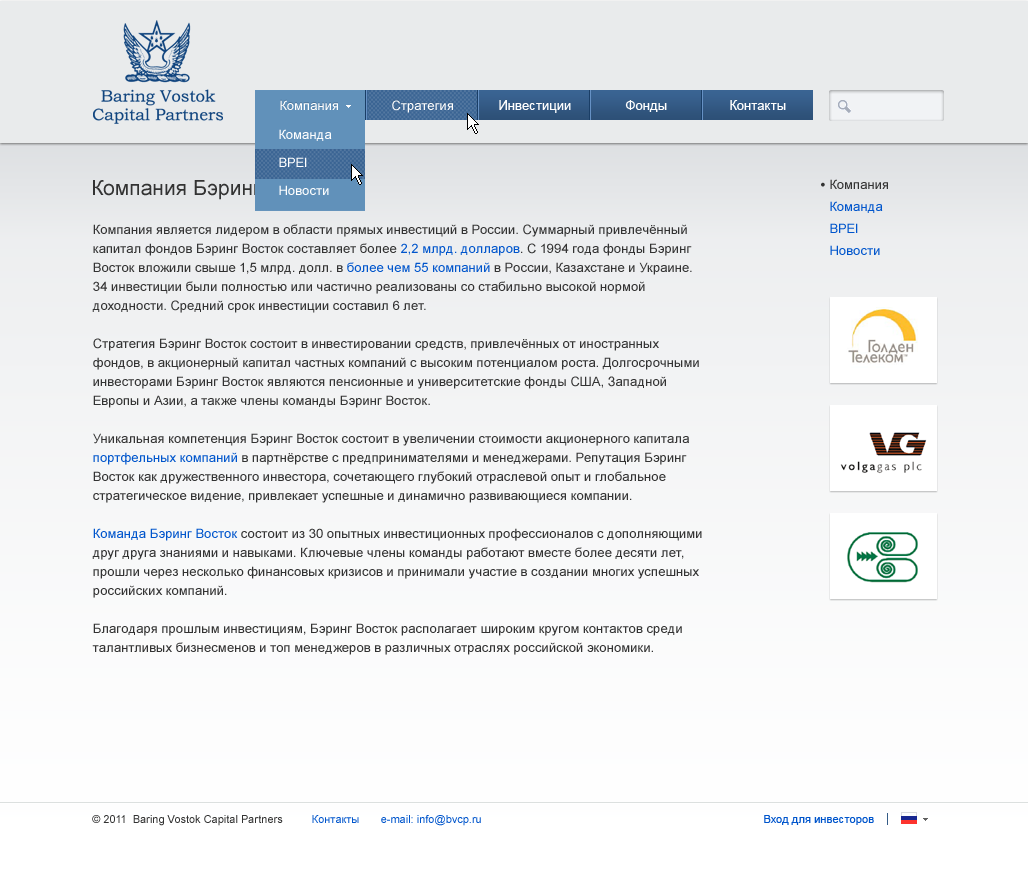
<style>
.page{position:relative;width:1028px;height:894px}
.page>*{position:absolute;margin:0}
.t1{font:13px "ArialMT";color:#ffffff}
.t2{font:13px "ArialMT";color:#fefefe}
.t3{font:13px/28px "ArialMT";color:#ffffff}
.t4{font:21px "ArialMT";color:#333333}
.t5{font:15px "ArialMT";color:#333333}
.t6{font:13px/22px "ArialMT";color:#0055cc}
.t7{font:13px/22px "ArialMT";color:#333333}
.t8{font:13px/19px "ArialMT";color:#333333}
.t9{font:13px/19px "ArialMT";color:#0055cc}
.t10{font:11px "ArialMT";color:#333333}
.t11{font:11px "ArialMT";color:#0055cc}
</style>
<div class="page">
<p class="t1" style="left:280px;top:100px;width:58px;height:10px">Компания</p>
<p class="t2" style="left:392px;top:100px;width:61px;height:13px">Стратегия</p>
<p class="t1" style="left:499px;top:100px;width:72px;height:13px">Инвестиции</p>
<p class="t2" style="left:625px;top:100px;width:42px;height:12px">Фонды</p>
<p class="t1" style="left:730px;top:100px;width:56px;height:10px">Контакты</p>
<p class="t3" style="left:279px;top:129px;width:53px;height:66px">Команда<br>BPEI<br>Новости</p>
<p class="t4" style="left:93px;top:180px;width:241px;height:20px">Компания Бэринг Восток</p>
<p class="t5" style="left:821px;top:182px;width:4px;height:5px">•</p>
<p class="t6" style="left:830px;top:179px;width:58px;height:76px"><span class="t7">Компания<br></span>Команда<br>BPEI<br>Новости</p>
<p class="t8" style="left:92px;top:224px;width:610px;height:431px">Компания является лидером в области прямых инвестиций в России. Суммарный привлечённый <br>капитал фондов Бэринг Восток составляет более <span class="t9">2,2 млрд. долларов</span>. С 1994 года фонды Бэринг <br>Восток вложили свыше 1,5 млрд. долл. в <span class="t9">более чем 55 компаний</span> в России, Казахстане и Украине. <br>34 инвестиции были полностью или частично реализованы со стабильно высокой нормой <br>доходности. Средний срок инвестиции составил 6 лет.<br><br>Стратегия Бэринг Восток состоит в инвестировании средств, привлечённых от иностранных <br>фондов, в акционерный капитал частных компаний с высоким потенциалом роста. Долгосрочными <br>инвесторами Бэринг Восток являются пенсионные и университетские фонды США, Западной <br>Европы и Азии, а также члены команды Бэринг Восток. <br><br>Уникальная компетенция Бэринг Восток состоит в увеличении стоимости акционерного капитала <br><span class="t9">портфельных компаний</span> в партнёрстве с предпринимателями и менеджерами. Репутация Бэринг <br>Восток как дружественного инвестора, сочетающего глубокий отраслевой опыт и глобальное <br>стратегическое видение, привлекает успешные и динамично развивающиеся компании.<br><br><span class="t9">Команда Бэринг Восток</span> состоит из 30 опытных инвестиционных профессионалов с дополняющими <br>друг друга знаниями и навыками. Ключевые члены команды работают вместе более десяти лет, <br>прошли через несколько финансовых кризисов и принимали участие в создании многих успешных <br>российских компаний. <br><br>Благодаря прошлым инвестициям, Бэринг Восток располагает широким кругом контактов среди <br>талантливых бизнесменов и топ менеджеров в различных отраслях российской экономики.</p>
<p class="t10" style="left:92px;top:815px;width:191px;height:11px">© 2011  Baring Vostok Capital Partners</p>
<p class="t11" style="left:312px;top:815px;width:169px;height:11px">Контакты       e-mail: info@bvcp.ru</p>
<p class="t11" style="left:764px;top:815px;width:110px;height:10px">Вход для инвесторов</p>
</div>
